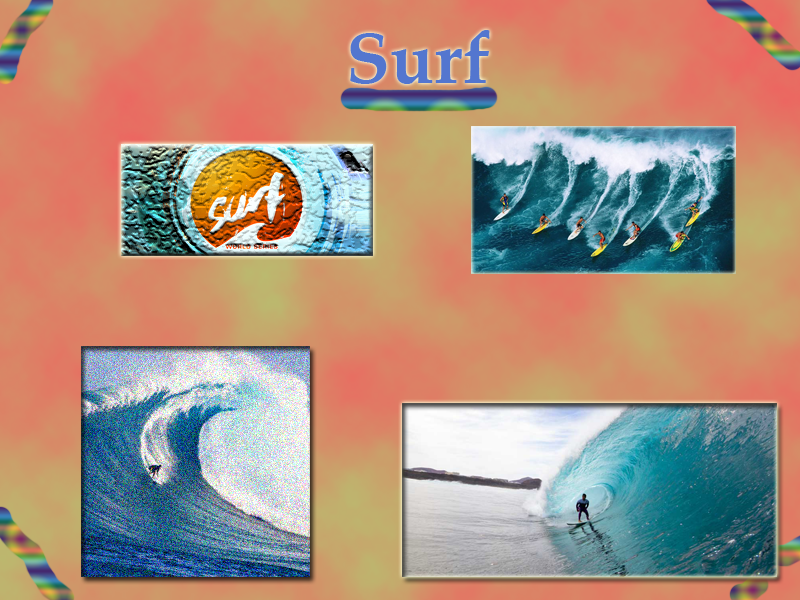
<style>
.page{position:relative;width:800px;height:600px}
.page>*{position:absolute;margin:0}
.t1{font:72px "PalatinoLinotype-Bold";color:#5376cf}
</style>
<div class="page">
<p class="t1" style="left:350px;top:30px;width:140px;height:54px">Surf</p>
</div>
